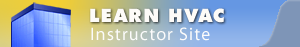
<style>
.page{position:relative;width:300px;height:47px}
.page>*{position:absolute;margin:0}
.t1{font:18px "FuturistExtrabold";letter-spacing:0.06em;color:#fdfbf8}
.t2{font:18px "MyriadPro-Regular";letter-spacing:0.06em;color:#fbfbfb}
</style>
<div class="page">
<p class="t1" style="left:90px;top:8px;width:68px;height:14px">LEARN</p>
<p class="t1" style="left:169px;top:8px;width:55px;height:15px">HVAC</p>
<p class="t2" style="left:91px;top:27px;width:119px;height:14px">Instructor Site</p>
</div>
